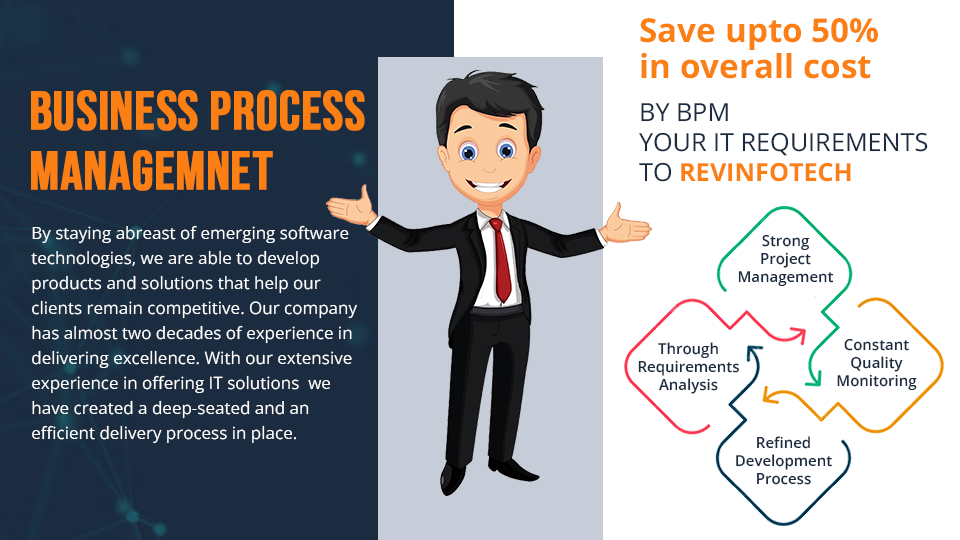
<style>
.page{position:relative;width:960px;height:540px;background:#ffffff}
.page>*{position:absolute;margin:0}
.t1{font:33px/36px "OpenSans-Bold";color:#fb7f12}
.t2{font:54px/60px "BebasNeue-Regular";color:#fb7f12;font-weight:bold}
.t3{font:25px "OpenSans-Regular";color:#1b2c40;text-transform:uppercase}
.t4{font:25px "OpenSans-Bold";color:#fb7f12;text-transform:uppercase}
.t5{font:17px/25px "OpenSans-Regular";color:#ffffff}
.t6{font:15px "OpenSans-SemiBold";color:#1b2c40}
</style>
<div class="page">
<p class="t1" style="left:640px;top:18px;width:238px;height:61px">Save upto 50%<br>in overall cost</p>
<p class="t2" style="left:31px;top:90px;width:334px;height:101px">Business process<br>managemnet</p>
<p class="t3" style="left:639px;top:103px;width:289px;height:79px">By BPM<br>your IT requirements<br>to <span class="t4">revinfotech</span></p>
<p class="t5" style="left:31px;top:225px;width:326px;height:219px">By staying abreast of emerging software technologies, we are able to develop products and solutions that help our<br>clients remain competitive. Our company has almost two decades of experience in delivering excellence. With our extensive experience in offering IT solutions  we have created a deep-seated and an<br>efficient delivery process in place.</p>
<p class="t6" style="left:738px;top:234px;width:96px;height:52px;text-align:center">Strong<br>Project<br>Management</p>
<p class="t6" style="left:638px;top:342px;width:101px;height:52px;text-align:center">Through<br>Requirements<br>Analysis</p>
<p class="t6" style="left:837px;top:338px;width:80px;height:52px;text-align:center">Constant<br>Quality<br>Monitoring</p>
<p class="t6" style="left:736px;top:436px;width:96px;height:49px;text-align:center">Refined<br>Development<br>Process</p>
</div>
